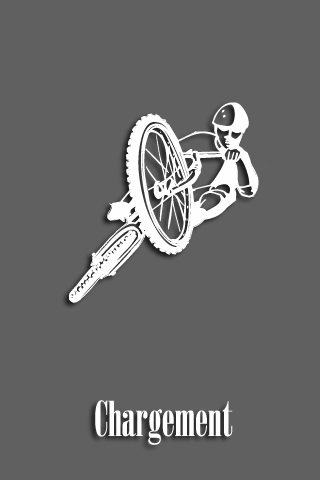
<style>
.page{position:relative;width:320px;height:480px;background:#606060}
.page>*{position:absolute;margin:0}
.t1{font:200px "Cycling";color:#fefefe}
.t2{font:48px "Onyx";color:#fefefe}
</style>
<div class="page">
<p class="t1" style="left:69px;top:102px;width:190px;height:201px">r</p>
<p class="t2" style="left:95px;top:400px;width:138px;height:45px">Chargement</p>
</div>
